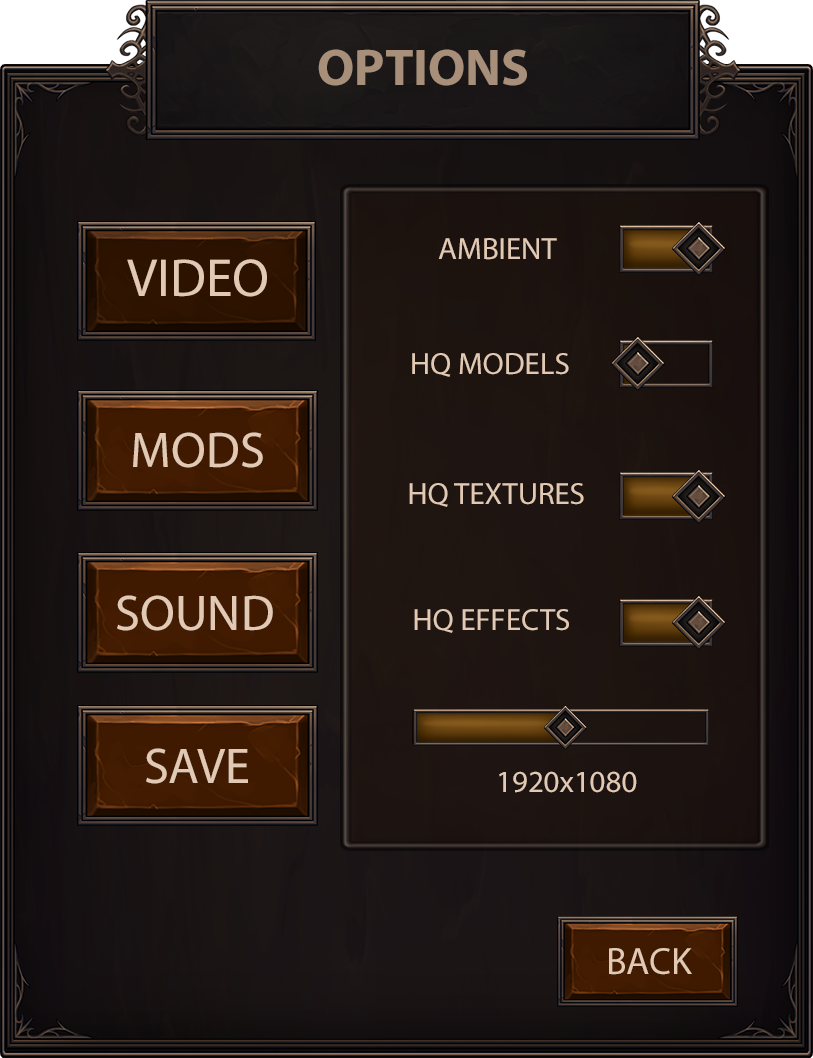
<style>
.page{position:relative;width:813px;height:1058px}
.page>*{position:absolute;margin:0}
.t1{font:52px "MyriadPro-Bold";color:#a78f79}
.t2{font:30.9px "MyriadPro-Regular";color:#e2c9b4}
.t3{font:53.8px "MyriadPro-Regular";color:#e2c9b4}
.t4{font:50.6px "MyriadPro-Regular";color:#e2c9b4}
.t5{font:50.4px "MyriadPro-Regular";color:#e2c9b4}
.t6{font:38px "MyriadPro-Regular";color:#e2c9b4}
</style>
<div class="page">
<p class="t1" style="left:318px;top:49px;width:209px;height:37px">OPTIONS</p>
<p class="t2" style="left:438px;top:238px;width:119px;height:22px">AMBIENT</p>
<p class="t3" style="left:127px;top:259px;width:140px;height:38px">VIDEO</p>
<p class="t2" style="left:412px;top:353px;width:157px;height:24px">HQ MODELS</p>
<p class="t4" style="left:133px;top:432px;width:130px;height:36px">MODS</p>
<p class="t2" style="left:409px;top:483px;width:175px;height:24px">HQ TEXTURES</p>
<p class="t5" style="left:117px;top:595px;width:156px;height:36px">SOUND</p>
<p class="t2" style="left:414px;top:609px;width:155px;height:24px">HQ EFFECTS</p>
<p class="t5" style="left:146px;top:748px;width:102px;height:36px">SAVE</p>
<p class="t2" style="left:499px;top:771px;width:138px;height:22px">1920x1080</p>
<p class="t6" style="left:609px;top:948px;width:83px;height:27px">BACK</p>
</div>
